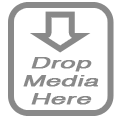
<style>
.page{position:relative;width:120px;height:120px;background:#ffffff}
.page>*{position:absolute;margin:0}
.t1{font:14.8px "Helvetica";color:#898989;font-weight:bold;font-style:italic;scale:1.81 1}
</style>
<div class="page">
<p class="t1" style="left:23px;top:57px;width:76px;height:48px;text-align:center">Drop<br>Media<br>Here</p>
</div>
